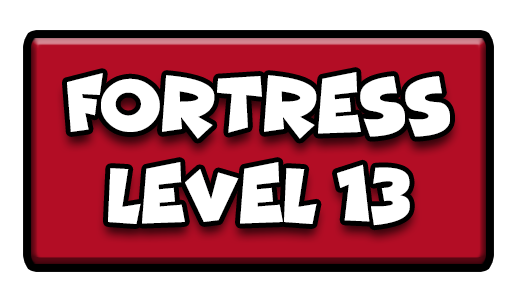
<style>
.page{position:relative;width:517px;height:301px;background:#ffffff}
.page>*{position:absolute;margin:0}
.t1{font:77.7px "Funhouse";color:#ffffff;scale:0.95 1}
</style>
<div class="page">
<p class="t1" style="left:67px;top:72px;width:383px;height:67px">FORTRESS</p>
<p class="t1" style="left:108px;top:162px;width:302px;height:64px">LEVEL 13</p>
</div>
